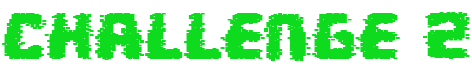
<style>
.page{position:relative;width:472px;height:82px;background:#ffffff}
.page>*{position:absolute;margin:0}
.t1{font:58.8px "Multivac-Ghost";color:#0fdb1e;text-transform:uppercase;font-weight:bold}
</style>
<div class="page">
<p class="t1" style="left:2px;top:12px;width:468px;height:49px">Challenge 2</p>
</div>
